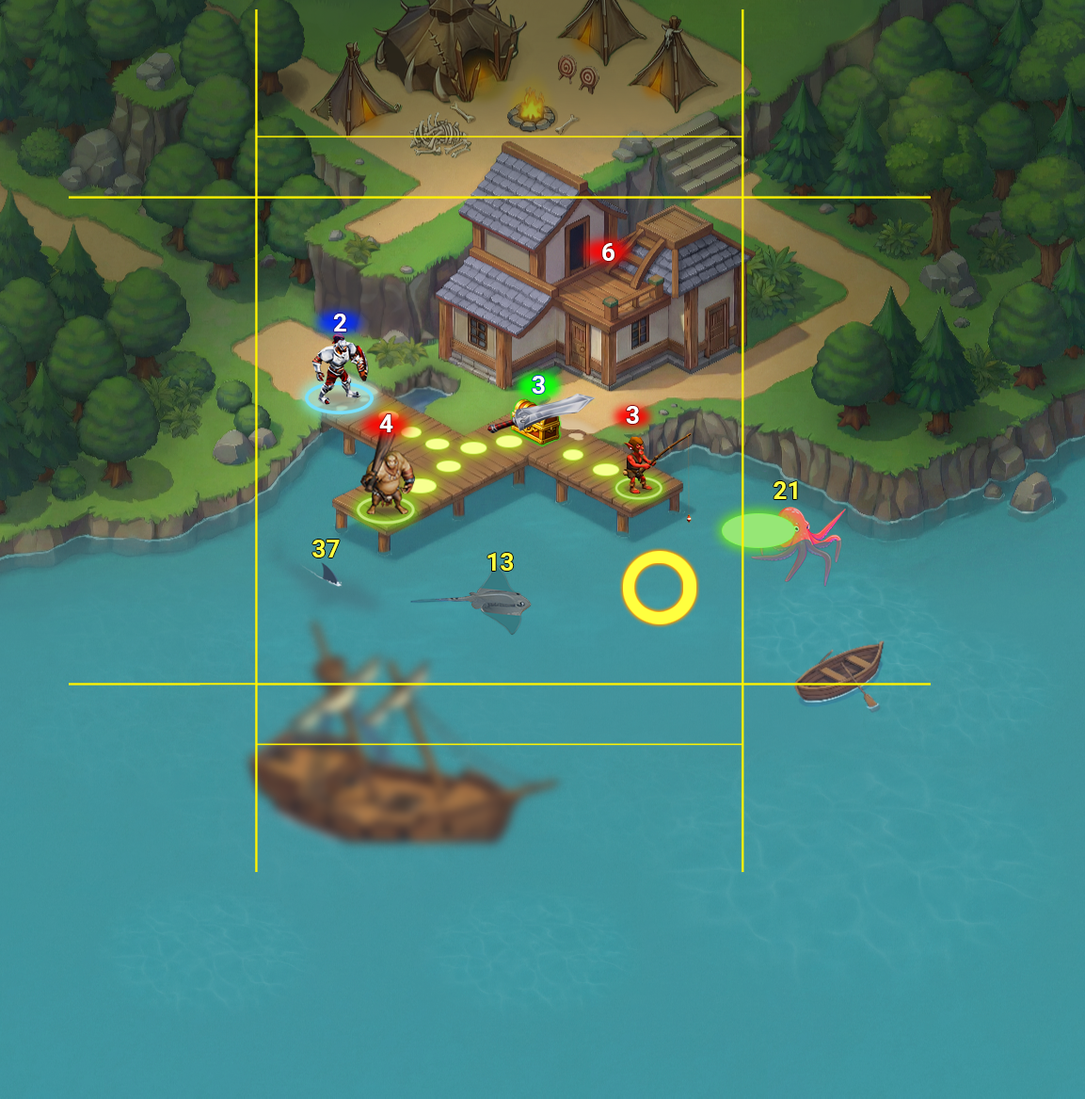
<style>
.page{position:relative;width:1085px;height:1099px}
.page>*{position:absolute;margin:0}
.t1{font:24.6px "Roboto-Bold";color:#ffffff}
.t2{font:24.6px "Roboto-Bold";color:#ffff3f}
</style>
<div class="page">
<p class="t1" style="left:602px;top:243px;width:13px;height:18px">6</p>
<p class="t1" style="left:333px;top:313px;width:13px;height:18px">2</p>
<p class="t1" style="left:532px;top:376px;width:13px;height:17px">3</p>
<p class="t1" style="left:626px;top:406px;width:13px;height:18px">3</p>
<p class="t1" style="left:379px;top:414px;width:14px;height:18px">4</p>
<p class="t2" style="left:774px;top:481px;width:23px;height:18px">21</p>
<p class="t2" style="left:313px;top:539px;width:27px;height:18px">37</p>
<p class="t2" style="left:488px;top:553px;width:26px;height:17px">13</p>
</div>
